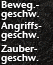
<style>
.page{position:relative;width:53px;height:65px}
.page>*{position:absolute;margin:0}
.t1{font:10px/9px "StoneSansSemITCTTSemi";color:#ffffff}
.t2{font:10px/9px "StoneSansSemITCTTSemi";letter-spacing:-0.01em;color:#ffffff}
</style>
<div class="page">
<p class="t1" style="left:1px;top:1px;width:38px;height:19px">Beweg.-<br>geschw.</p>
<p class="t1" style="left:1px;top:22px;width:41px;height:19px">Angriffs-<br>geschw.</p>
<p class="t2" style="left:1px;top:45px;width:38px;height:19px">Zauber-<br>geschw.</p>
</div>
